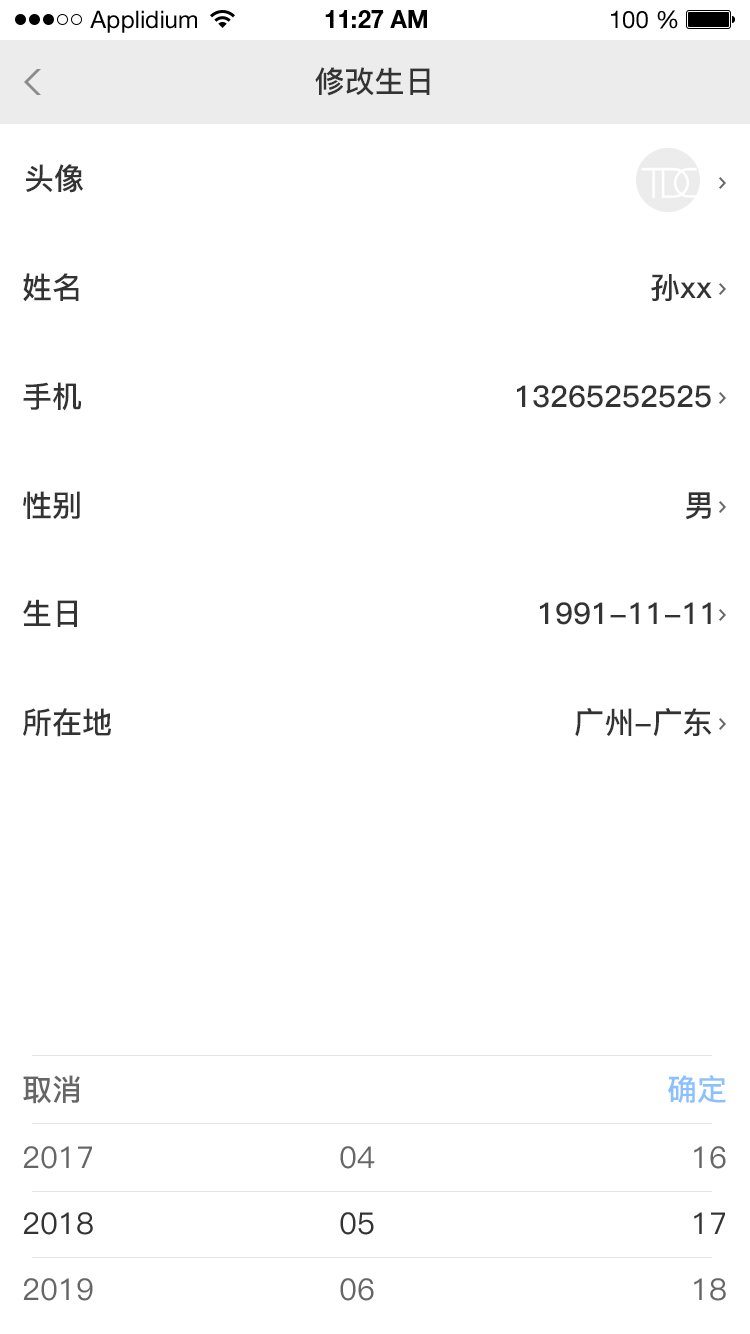
<style>
.page{position:relative;width:750px;height:1334px;background:#ffffff}
.page>*{position:absolute;margin:0}
.t1{font:24px "HelveticaNeueLTStd-Roman";color:#000000}
.t2{font:24px "HelveticaNeueLTStd-Bd";color:#000000}
.t3{font:30px "PingFang-SC-Bold";color:#333333}
.t4{font:30px "PingFang-SC-Bold";color:#666666}
.t5{font:30px "PingFang-SC-Bold";color:#8ac0ff}
.t6{font:30px "PingFang-SC-Medium";color:#666666}
.t7{font:30px "PingFang-SC-Medium";color:#333333}
</style>
<div class="page">
<p class="t1" style="left:90px;top:10px;width:107px;height:23px">Applidium</p>
<p class="t2" style="left:325px;top:10px;width:102px;height:18px">11:27 AM</p>
<p class="t1" style="left:611px;top:10px;width:67px;height:19px">100 %</p>
<p class="t3" style="left:315px;top:67px;width:115px;height:29px">修改生日</p>
<p class="t3" style="left:26px;top:164px;width:57px;height:29px">头像</p>
<p class="t3" style="left:23px;top:273px;width:56px;height:29px">姓名</p>
<p class="t3" style="left:651px;top:274px;width:61px;height:27px">孙xx</p>
<p class="t3" style="left:23px;top:382px;width:58px;height:29px">手机</p>
<p class="t3" style="left:517px;top:385px;width:194px;height:23px">13265252525</p>
<p class="t3" style="left:23px;top:491px;width:57px;height:28px">性别</p>
<p class="t3" style="left:685px;top:492px;width:26px;height:28px">男</p>
<p class="t3" style="left:23px;top:599px;width:54px;height:28px">生日</p>
<p class="t3" style="left:540px;top:602px;width:171px;height:23px">1991-11-11</p>
<p class="t3" style="left:23px;top:708px;width:88px;height:29px">所在地</p>
<p class="t3" style="left:575px;top:708px;width:137px;height:29px">广州-广东</p>
<p class="t4" style="left:23px;top:1075px;width:57px;height:29px">取消</p>
<p class="t5" style="left:668px;top:1075px;width:58px;height:28px">确定</p>
<p class="t6" style="left:23px;top:1146px;width:69px;height:23px">2017</p>
<p class="t6" style="left:340px;top:1146px;width:35px;height:23px">04</p>
<p class="t6" style="left:694px;top:1146px;width:32px;height:23px">16</p>
<p class="t7" style="left:23px;top:1212px;width:70px;height:23px">2018</p>
<p class="t7" style="left:340px;top:1212px;width:34px;height:23px">05</p>
<p class="t7" style="left:694px;top:1212px;width:31px;height:22px">17</p>
<p class="t6" style="left:23px;top:1278px;width:70px;height:23px">2019</p>
<p class="t6" style="left:340px;top:1278px;width:34px;height:23px">06</p>
<p class="t6" style="left:694px;top:1278px;width:32px;height:23px">18</p>
</div>
